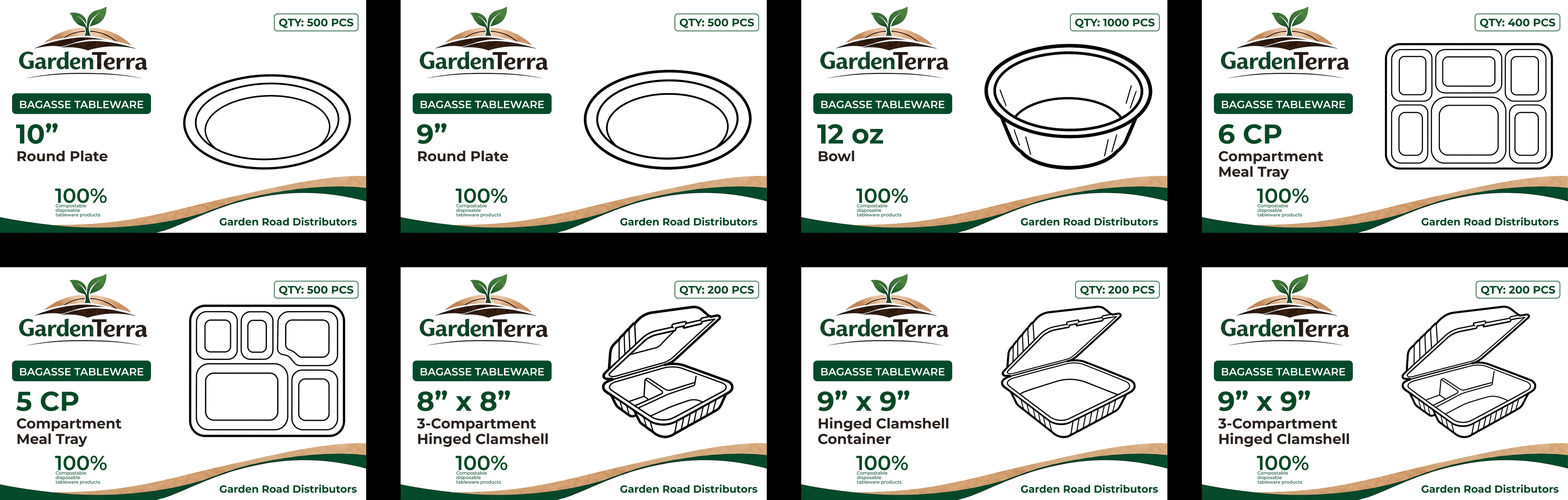
<style>
.page{position:relative;width:1568px;height:500px;background:#ffffff}
.page>*{position:absolute;margin:0}
.t1{font:10.8px "Montserrat-Bold";color:#054826}
.t2{font:10.6px "Montserrat-SemiBold";color:#ffffff}
.t3{font:27.1px "Montserrat-Bold";color:#054826}
.t4{font:14.2px "Montserrat-Bold";color:#2a221e}
.t5{font:14.2px/15.5px "Montserrat-Bold";color:#2a221e}
.t6{font:20.2px "Montserrat-SemiBold";color:#054826}
.t7{font:4.5px/4.5px "Montserrat-Medium";color:#054826}
.t8{font:10.3px "Montserrat-Bold";color:#054826}
</style>
<div class="page">
<p class="t1" style="left:279px;top:19px;width:74px;height:9px">QTY: 500 PCS</p>
<p class="t1" style="left:680px;top:19px;width:74px;height:9px">QTY: 500 PCS</p>
<p class="t1" style="left:1075px;top:19px;width:80px;height:9px">QTY: 1000 PCS</p>
<p class="t1" style="left:1480px;top:19px;width:75px;height:9px">QTY: 400 PCS</p>
<p class="t2" style="left:20px;top:101px;width:123px;height:7px">BAGASSE TABLEWARE</p>
<p class="t2" style="left:421px;top:101px;width:123px;height:7px">BAGASSE TABLEWARE</p>
<p class="t2" style="left:821px;top:101px;width:124px;height:7px">BAGASSE TABLEWARE</p>
<p class="t2" style="left:1222px;top:101px;width:123px;height:7px">BAGASSE TABLEWARE</p>
<p class="t3" style="left:16px;top:123px;width:42px;height:21px">10”</p>
<p class="t3" style="left:417px;top:123px;width:29px;height:21px">9”</p>
<p class="t3" style="left:817px;top:124px;width:66px;height:20px">12 oz</p>
<p class="t3" style="left:1219px;top:124px;width:63px;height:20px">6 CP</p>
<p class="t4" style="left:17px;top:151px;width:91px;height:10px">Round Plate</p>
<p class="t4" style="left:418px;top:151px;width:90px;height:10px">Round Plate</p>
<p class="t4" style="left:819px;top:151px;width:35px;height:10px">Bowl</p>
<p class="t5" style="left:1219px;top:151px;width:104px;height:29px">Compartment<br>Meal Tray</p>
<p class="t6" style="left:55px;top:188px;width:52px;height:15px">100%</p>
<p class="t6" style="left:456px;top:188px;width:51px;height:15px">100%</p>
<p class="t6" style="left:856px;top:188px;width:52px;height:15px">100%</p>
<p class="t6" style="left:1257px;top:188px;width:52px;height:15px">100%</p>
<p class="t7" style="left:56px;top:204px;width:44px;height:13px">Compostable<br>disposable<br>tableware products</p>
<p class="t7" style="left:456px;top:204px;width:45px;height:13px">Compostable<br>disposable<br>tableware products</p>
<p class="t7" style="left:857px;top:204px;width:45px;height:13px">Compostable<br>disposable<br>tableware products</p>
<p class="t7" style="left:1257px;top:204px;width:45px;height:13px">Compostable<br>disposable<br>tableware products</p>
<p class="t8" style="left:219px;top:217px;width:138px;height:9px">Garden Road Distributors</p>
<p class="t8" style="left:620px;top:217px;width:138px;height:9px">Garden Road Distributors</p>
<p class="t8" style="left:1021px;top:217px;width:137px;height:9px">Garden Road Distributors</p>
<p class="t8" style="left:1421px;top:217px;width:138px;height:9px">Garden Road Distributors</p>
<p class="t1" style="left:279px;top:286px;width:74px;height:9px">QTY: 500 PCS</p>
<p class="t1" style="left:680px;top:286px;width:74px;height:9px">QTY: 200 PCS</p>
<p class="t1" style="left:1080px;top:286px;width:75px;height:9px">QTY: 200 PCS</p>
<p class="t1" style="left:1481px;top:286px;width:74px;height:9px">QTY: 200 PCS</p>
<p class="t2" style="left:20px;top:368px;width:123px;height:7px">BAGASSE TABLEWARE</p>
<p class="t2" style="left:421px;top:368px;width:123px;height:7px">BAGASSE TABLEWARE</p>
<p class="t2" style="left:821px;top:368px;width:124px;height:7px">BAGASSE TABLEWARE</p>
<p class="t2" style="left:1222px;top:368px;width:123px;height:7px">BAGASSE TABLEWARE</p>
<p class="t3" style="left:16px;top:391px;width:62px;height:20px">5 CP</p>
<p class="t3" style="left:417px;top:390px;width:93px;height:21px">8” x 8”</p>
<p class="t3" style="left:818px;top:390px;width:92px;height:21px">9” x 9”</p>
<p class="t3" style="left:1218px;top:390px;width:92px;height:21px">9” x 9”</p>
<p class="t5" style="left:17px;top:418px;width:104px;height:29px">Compartment<br>Meal Tray</p>
<p class="t5" style="left:417px;top:418px;width:131px;height:29px">3-Compartment<br>Hinged Clamshell</p>
<p class="t5" style="left:818px;top:417px;width:130px;height:27px">Hinged Clamshell<br>Container</p>
<p class="t5" style="left:1218px;top:418px;width:131px;height:29px">3-Compartment<br>Hinged Clamshell</p>
<p class="t6" style="left:55px;top:455px;width:52px;height:15px">100%</p>
<p class="t6" style="left:456px;top:455px;width:51px;height:15px">100%</p>
<p class="t6" style="left:856px;top:455px;width:52px;height:15px">100%</p>
<p class="t6" style="left:1257px;top:455px;width:52px;height:15px">100%</p>
<p class="t7" style="left:56px;top:471px;width:44px;height:13px">Compostable<br>disposable<br>tableware products</p>
<p class="t7" style="left:456px;top:471px;width:45px;height:13px">Compostable<br>disposable<br>tableware products</p>
<p class="t7" style="left:857px;top:471px;width:45px;height:13px">Compostable<br>disposable<br>tableware products</p>
<p class="t7" style="left:1257px;top:471px;width:45px;height:13px">Compostable<br>disposable<br>tableware products</p>
<p class="t8" style="left:219px;top:484px;width:138px;height:9px">Garden Road Distributors</p>
<p class="t8" style="left:620px;top:484px;width:138px;height:9px">Garden Road Distributors</p>
<p class="t8" style="left:1021px;top:484px;width:137px;height:9px">Garden Road Distributors</p>
<p class="t8" style="left:1421px;top:484px;width:138px;height:9px">Garden Road Distributors</p>
</div>
